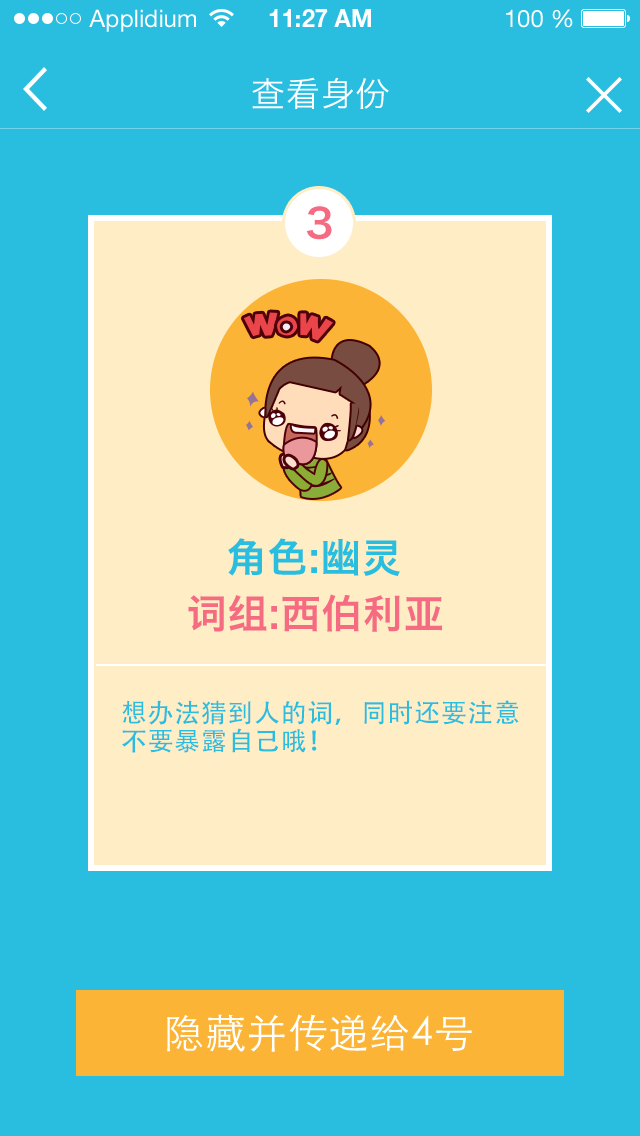
<style>
.page{position:relative;width:640px;height:1136px;background:#29bde0}
.page>*{position:absolute;margin:0}
.t1{font:34px "HiraginoSansGB-W3";letter-spacing:0.025em;color:#ffffff}
.t2{font:40px "HiraginoSansGB-W6";letter-spacing:0.025em;color:#f56b81}
.t3{font:40px "HiraginoSansGB-W6";letter-spacing:0.025em;color:#29bde0}
.t4{font:26px/28px "AdobeHeitiStd-Regular";letter-spacing:0.025em;color:#29bde0}
.t5{font:40px "STHeitiSC-Light";letter-spacing:0.025em;color:#ffffff}
</style>
<div class="page">
<p class="t1" style="left:252px;top:77px;width:137px;height:32px">查看身份</p>
<p class="t2" style="left:306px;top:206px;width:26px;height:34px">3</p>
<p class="t3" style="left:228px;top:538px;width:172px;height:38px">角色:幽灵</p>
<p class="t2" style="left:188px;top:594px;width:254px;height:38px">词组:西伯利亚</p>
<p class="t4" style="left:122px;top:700px;width:397px;height:53px">想办法猜到人的词，同时还要注意<br>不要暴露自己哦！</p>
<p class="t5" style="left:167px;top:1014px;width:305px;height:38px">隐藏并传递给4号</p>
</div>
